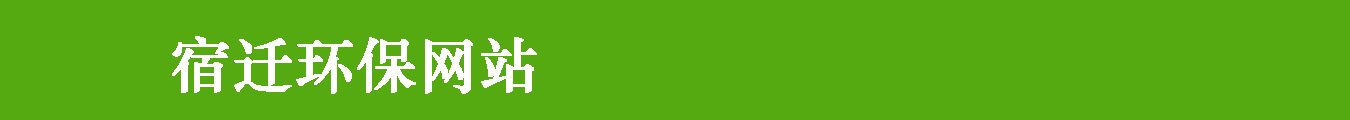
<style>
.page{position:relative;width:1350px;height:120px;background:#55aa11}
.page>*{position:absolute;margin:0}
.t1{font:60px "STZhongsong";color:#ffffff;font-weight:bold}
</style>
<div class="page">
<p class="t1" style="left:172px;top:36px;width:365px;height:58px">宿迁环保网站</p>
</div>
